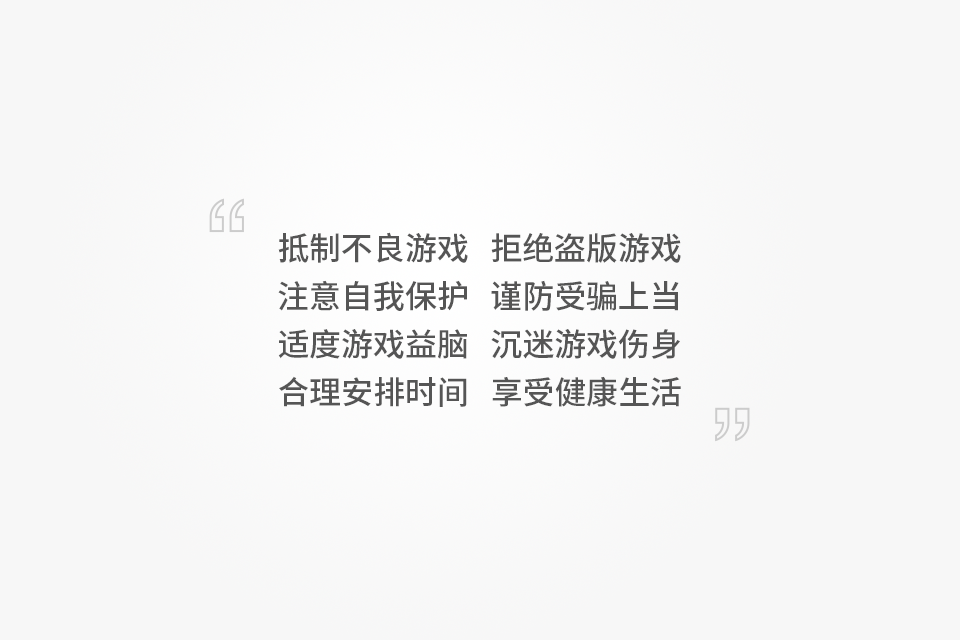
<style>
.page{position:relative;width:960px;height:640px;background:#f7f7f7}
.page>*{position:absolute;margin:0}
.t1{font:32px/48px "NotoSansHans-Medium";color:#555555}
</style>
<div class="page">
<p class="t1" style="left:278px;top:232px;width:403px;height:175px">抵制不良游戏   拒绝盗版游戏 <br>注意自我保护   谨防受骗上当   <br>适度游戏益脑   沉迷游戏伤身   <br>合理安排时间   享受健康生活</p>
</div>
